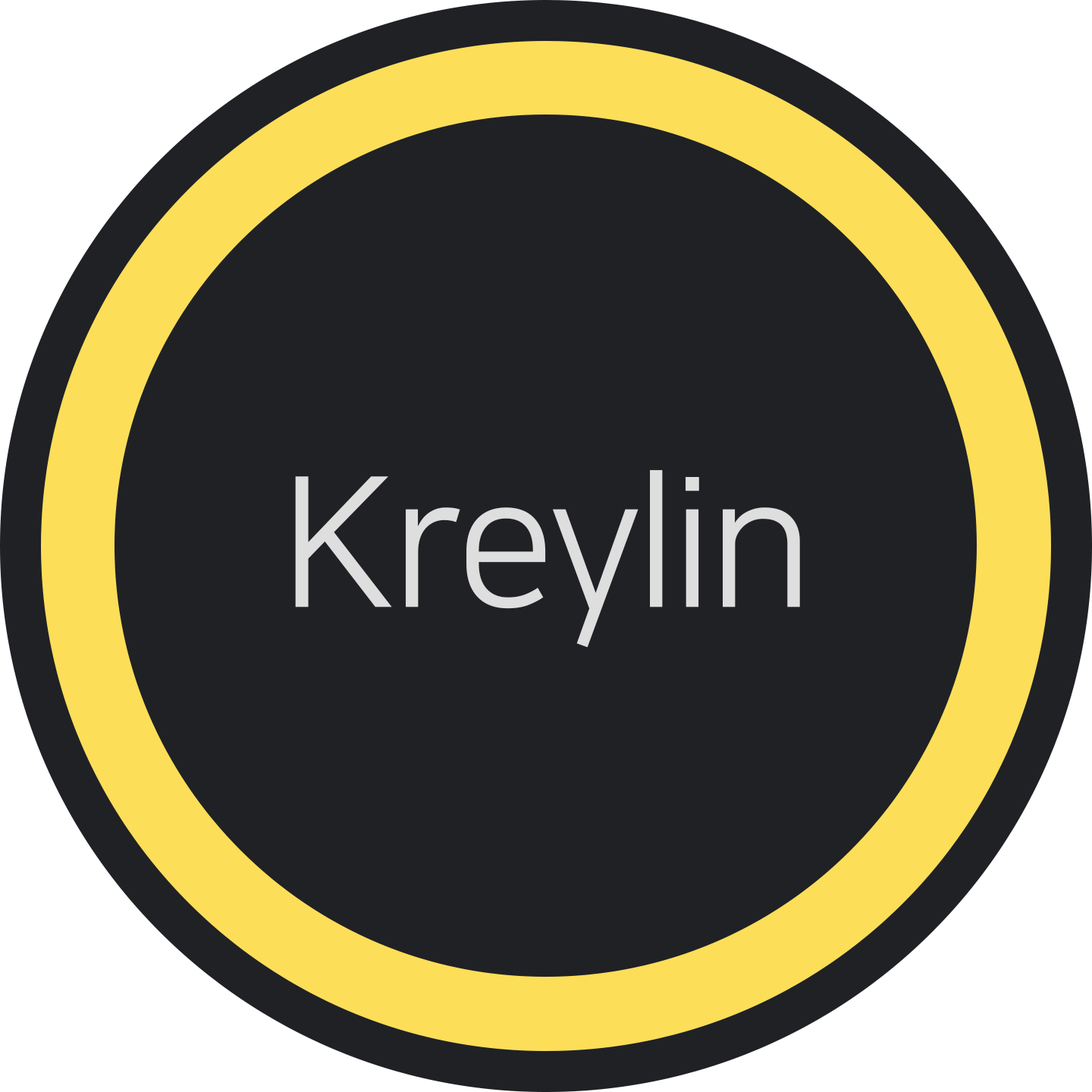
<style>
.page{position:relative;width:1092px;height:1092px;background:#1f2125}
.page>*{position:absolute;margin:0}
.t1{font:180.8px "NanumSquareR";letter-spacing:-0.03em;color:#dedede}
</style>
<div class="page">
<p class="t1" style="left:295px;top:469px;width:505px;height:179px">Kreylin</p>
</div>
